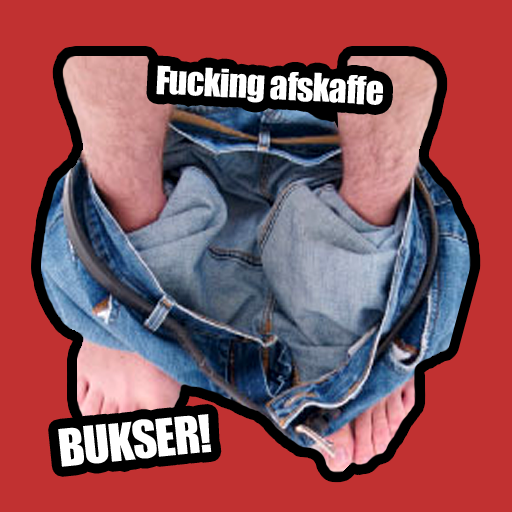
<style>
.page{position:relative;width:512px;height:512px;background:#c13131}
.page>*{position:absolute;margin:0}
.t1{font:36px "Impact";letter-spacing:-0.025em;color:#ffffff}
.t2{font:48px "Impact";letter-spacing:-0.025em;color:#ffffff}
</style>
<div class="page">
<p class="t1" style="left:156px;top:65px;width:227px;height:40px;rotate:3deg">Fucking afskaffe</p>
<p class="t2" style="left:58px;top:414px;width:154px;height:53px;rotate:-6deg">BUKSER!</p>
</div>
